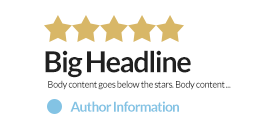
<style>
.page{position:relative;width:276px;height:125px;background:#ffffff}
.page>*{position:absolute;margin:0}
.t1{font:29px "Lato-Bold";letter-spacing:-0.05em;color:#202020}
.t2{font:9.4px "Lato-Regular";letter-spacing:-0.05em}
.t3{font:13.8px "Lato-Bold";letter-spacing:-0.05em;color:#83c3e4}
</style>
<div class="page">
<p class="t1" style="left:45px;top:50px;width:146px;height:28px">Big Headline</p>
<p class="t2" style="left:48px;top:80px;width:183px;height:10px">Body content goes below the stars. Body content ...</p>
<p class="t3" style="left:70px;top:101px;width:109px;height:11px">Author Information</p>
</div>
